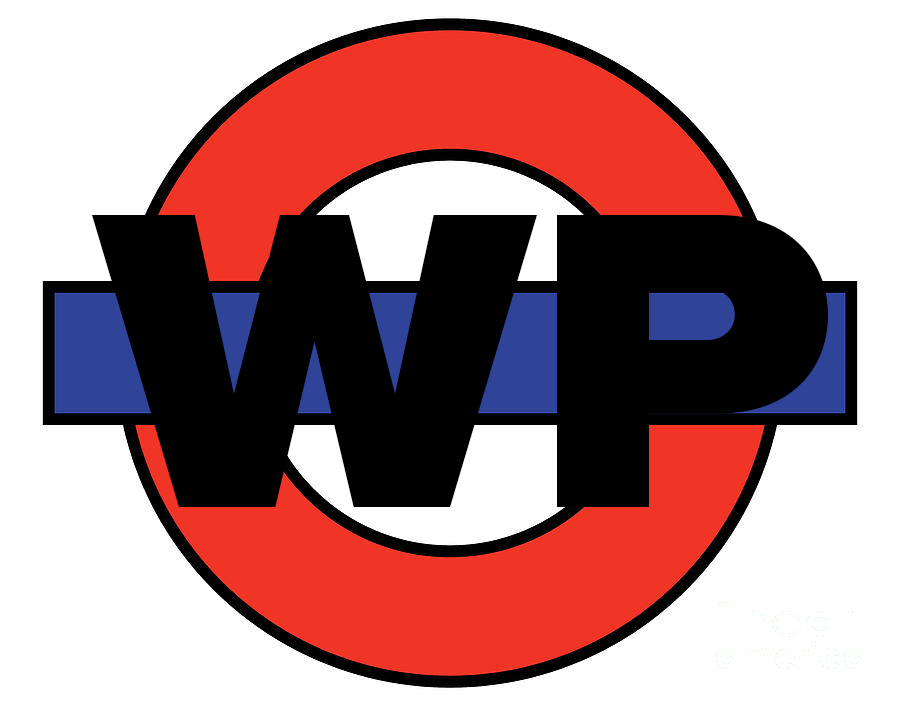
<style>
.page{position:relative;width:900px;height:704px;background:#ffffff}
.page>*{position:absolute;margin:0}
.t1{font:437.5px "ProximaNova-Black";color:#000000;font-variant:small-caps;scale:1.04 1}
</style>
<div class="page">
<p class="t1" style="left:92px;top:215px;width:736px;height:292px">WP</p>
</div>
